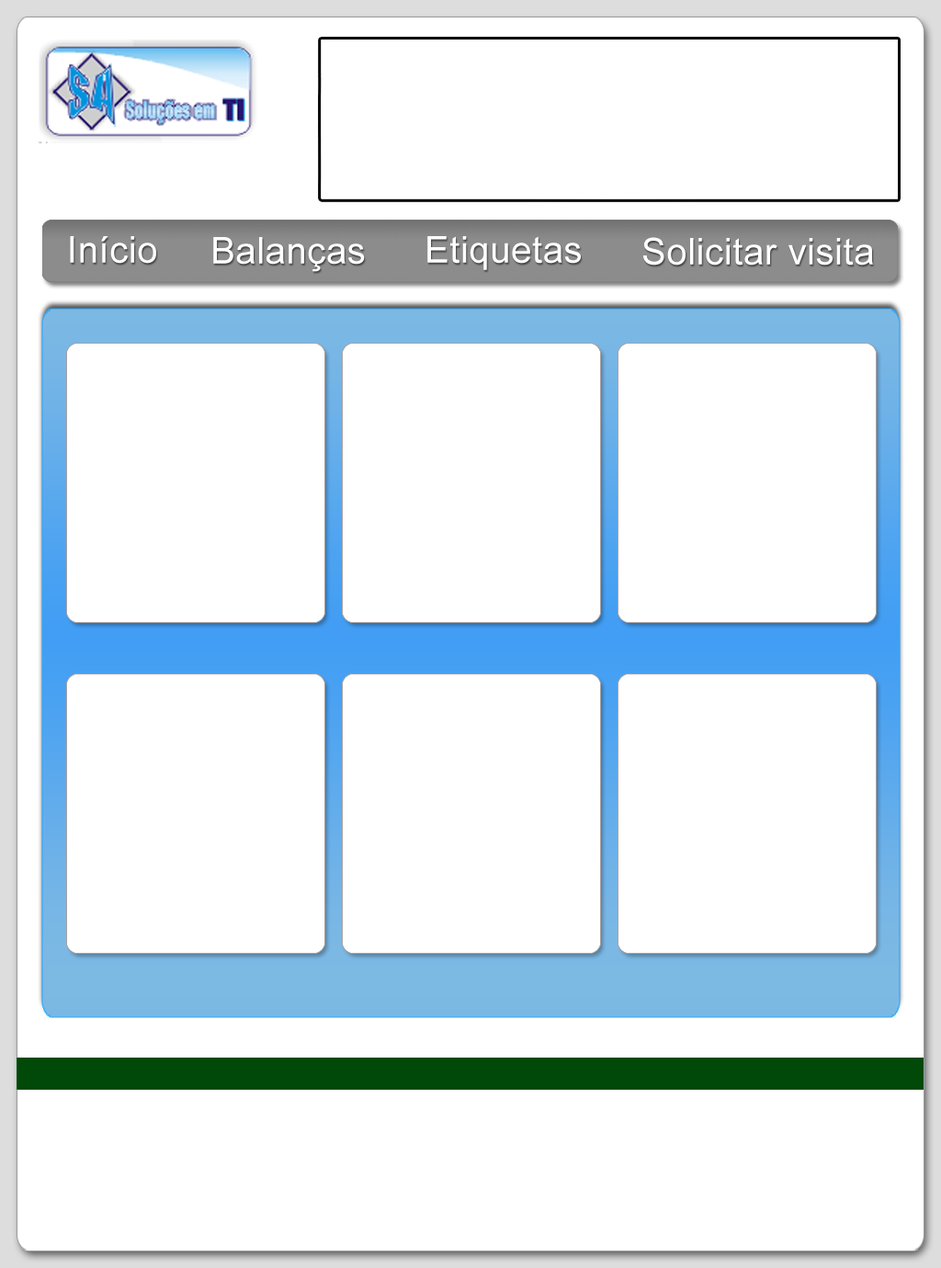
<style>
.page{position:relative;width:941px;height:1268px;background:#ffffff}
.page>*{position:absolute;margin:0}
.t1{font:36.7px "ArialMT";letter-spacing:0.015em;color:#ffffff}
</style>
<div class="page">
<p class="t1" style="left:70px;top:236px;width:86px;height:28px">Início</p>
<p class="t1" style="left:213px;top:237px;width:152px;height:35px">Balanças</p>
<p class="t1" style="left:427px;top:236px;width:154px;height:34px">Etiquetas</p>
<p class="t1" style="left:643px;top:237px;width:230px;height:28px">Solicitar visita</p>
</div>
